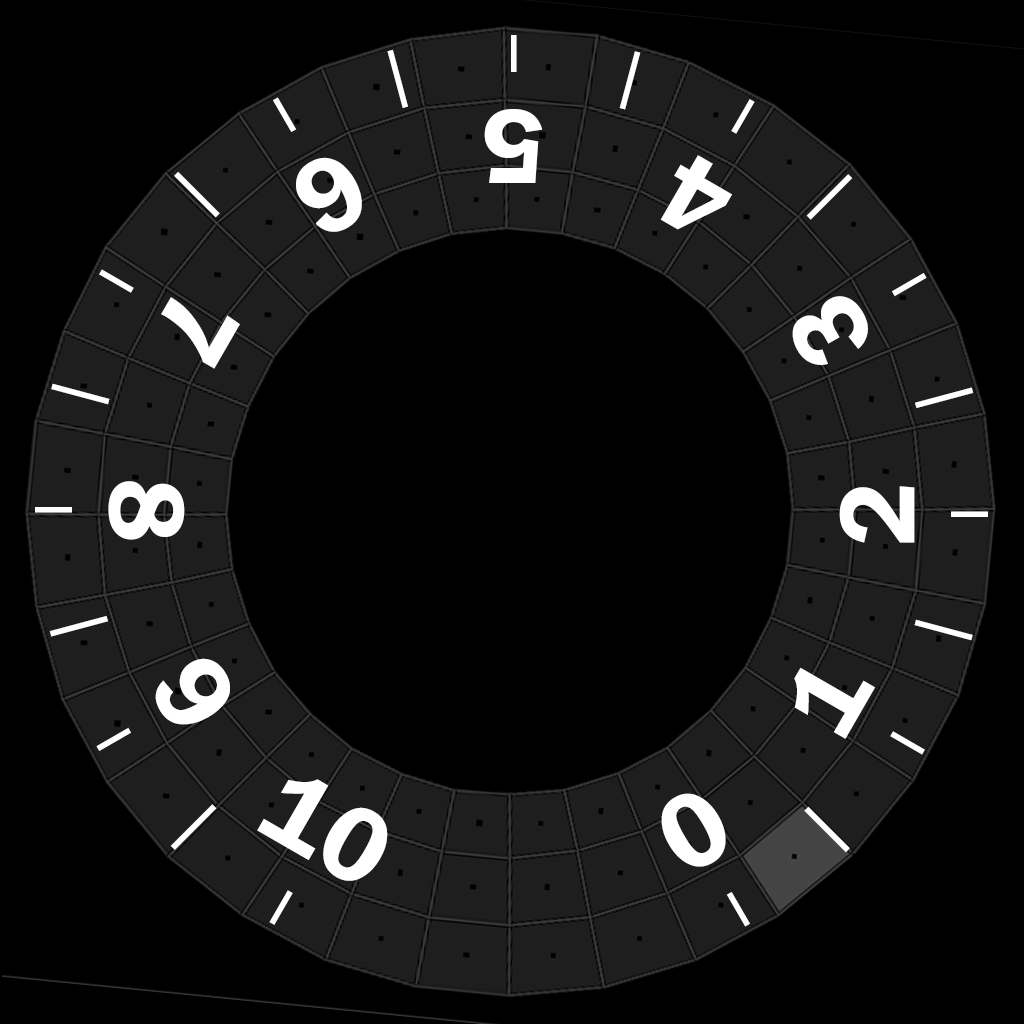
<style>
.page{position:relative;width:1024px;height:1024px;background:#000000}
.page>*{position:absolute;margin:0}
.t1{font:48px "AdobeHeitiStd-Regular";color:#ffffff}
.t2{font:76.8px "AdobeHeitiStd-Regular";color:#ffffff;scale:0.63 1}
.t3{font:110px "FranklinGothic-Demi";color:#ffffff}
</style>
<div class="page">
<p class="t1" style="left:511px;top:35px;width:6px;height:37px">I</p>
<p class="t2" style="left:387px;top:49px;width:21px;height:59px;rotate:-15deg">I</p>
<p class="t2" style="left:619px;top:51px;width:22px;height:59px;rotate:15deg">I</p>
<p class="t1" style="left:273px;top:97px;width:24px;height:35px;rotate:-30deg">I</p>
<p class="t1" style="left:731px;top:99px;width:24px;height:35px;rotate:30deg">I</p>
<p class="t3" style="left:484px;top:109px;width:59px;height:74px;rotate:180deg">5</p>
<p class="t3" style="left:296px;top:157px;width:66px;height:75px;rotate:150deg">6</p>
<p class="t3" style="left:660px;top:155px;width:72px;height:75px;rotate:-150deg">4</p>
<p class="t2" style="left:174px;top:171px;width:46px;height:47px;rotate:-45deg">I</p>
<p class="t2" style="left:806px;top:174px;width:47px;height:46px;rotate:45deg">I</p>
<p class="t1" style="left:99px;top:269px;width:35px;height:24px;rotate:-60deg">I</p>
<p class="t1" style="left:892px;top:273px;width:35px;height:24px;rotate:60deg">I</p>
<p class="t3" style="left:161px;top:297px;width:79px;height:72px;rotate:120deg">7</p>
<p class="t3" style="left:792px;top:296px;width:76px;height:69px;rotate:-120deg">3</p>
<p class="t2" style="left:51px;top:383px;width:59px;height:22px;rotate:-75deg">I</p>
<p class="t2" style="left:915px;top:387px;width:59px;height:21px;rotate:75deg">I</p>
<p class="t3" style="left:108px;top:481px;width:77px;height:59px;rotate:90deg">8</p>
<p class="t3" style="left:839px;top:486px;width:76px;height:57px;rotate:-90deg">2</p>
<p class="t1" style="left:35px;top:507px;width:37px;height:6px;rotate:-90deg">I</p>
<p class="t1" style="left:951px;top:511px;width:37px;height:6px;rotate:90deg">I</p>
<p class="t2" style="left:49px;top:616px;width:59px;height:21px;rotate:-105deg">I</p>
<p class="t2" style="left:914px;top:619px;width:59px;height:22px;rotate:105deg">I</p>
<p class="t3" style="left:155px;top:658px;width:75px;height:67px;rotate:60deg">9</p>
<p class="t3" style="left:794px;top:667px;width:81px;height:72px;rotate:-60deg">1</p>
<p class="t1" style="left:96px;top:727px;width:35px;height:24px;rotate:-120deg">I</p>
<p class="t1" style="left:890px;top:731px;width:35px;height:24px;rotate:120deg">I</p>
<p class="t3" style="left:257px;top:779px;width:131px;height:102px;rotate:30deg">106</p>
<p class="t3" style="left:661px;top:793px;width:65px;height:74px;rotate:-30deg">0</p>
<p class="t2" style="left:170px;top:804px;width:47px;height:46px;rotate:-135deg">I</p>
<p class="t2" style="left:804px;top:806px;width:46px;height:47px;rotate:135deg">I</p>
<p class="t1" style="left:269px;top:890px;width:24px;height:35px;rotate:-150deg">I</p>
<p class="t1" style="left:726px;top:892px;width:24px;height:35px;rotate:150deg">I</p>
</div>
